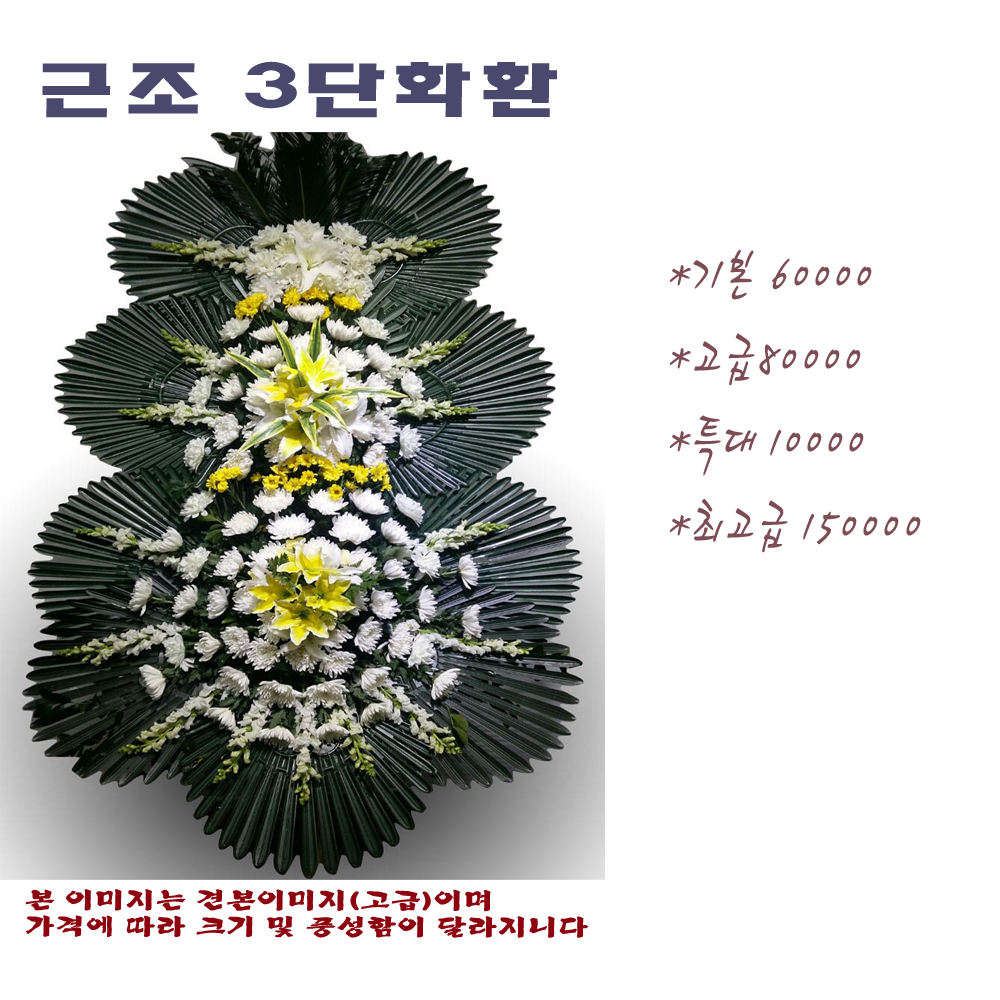
<style>
.page{position:relative;width:1000px;height:1000px;background:#ffffff}
.page>*{position:absolute;margin:0}
.t1{font:60.6px "HaanYHeadB";color:#4a496d;scale:1.7 1}
.t2{font:69.5px "HaanCjaB";color:#7d4d56;scale:0.73 1}
.t3{font:22.1px "Yj-BACDOO-Bold";color:#8c020f;scale:1.35 1}
</style>
<div class="page">
<p class="t1" style="left:42px;top:61px;width:515px;height:57px">근조 3단화환</p>
<p class="t2" style="left:669px;top:249px;width:252px;height:304px">*기본 60000<br>*고급80000<br>*특대 10000<br>*최고급 150000</p>
<p class="t3" style="left:25px;top:889px;width:563px;height:49px">본 이미지는 견본이미지(고급)이며<br>가격에 따라 크기 및 풍성함이 달라지니다</p>
</div>
